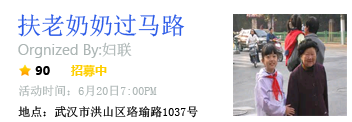
<style>
.page{position:relative;width:352px;height:122px;background:#ffffff}
.page>*{position:absolute;margin:0}
.t1{font:24px "SimSun";color:#2959e7}
.t2{font:15px "SegoeUI";color:#adb6b5}
.t3{font:15px "SimSun";color:#adb6b5}
.t4{font:12px "MicrosoftYaHei-Bold";color:#ffcf00}
.t5{font:12px "MicrosoftYaHei-Bold";color:#000000}
.t6{font:12px "SimSun";color:#000000}
.t7{font:12px "SimSun";color:#adb6b5}
</style>
<div class="page">
<p class="t1" style="left:18px;top:14px;width:167px;height:23px">扶老奶奶过马路</p>
<p class="t2" style="left:18px;top:42px;width:114px;height:16px">Orgnized By:<span class="t3">妇联</span></p>
<p class="t4" style="left:71px;top:64px;width:36px;height:13px">招募中</p>
<p class="t5" style="left:35px;top:66px;width:15px;height:9px">90</p>
<p class="t6" style="left:18px;top:85px;width:180px;height:33px"><span class="t7"><br>活动时间：6月20日7:00PM<br></span>地点：武汉市洪山区珞瑜路1037号</p>
</div>
